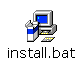
<style>
.page{position:relative;width:80px;height:80px;background:#ffffff}
.page>*{position:absolute;margin:0}
.t1{font:14px "MSReferenceSansSerif";color:#000000}
</style>
<div class="page">
<p class="t1" style="left:8px;top:47px;width:67px;height:11px">install.bat</p>
</div>
